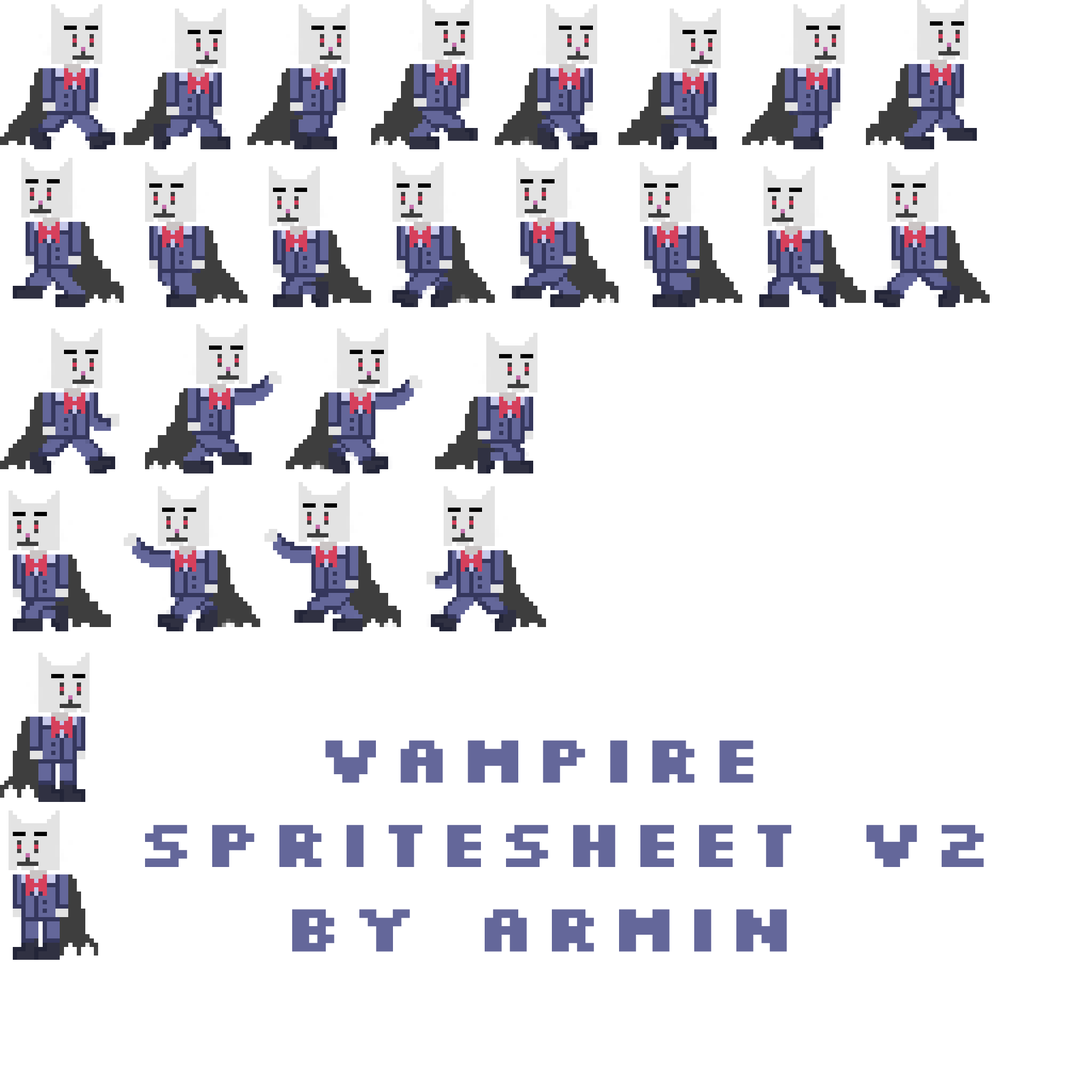
<style>
.page{position:relative;width:1092px;height:1092px;background:#ffffff}
.page>*{position:absolute;margin:0}
.t1{font:70.4px "Silkscreen-ExpandedBold";color:#64679a}
</style>
<div class="page">
<p class="t1" style="left:145px;top:740px;width:839px;height:212px;text-align:center">Vampire <br>spritesheet v2<br>BY Armin</p>
</div>
